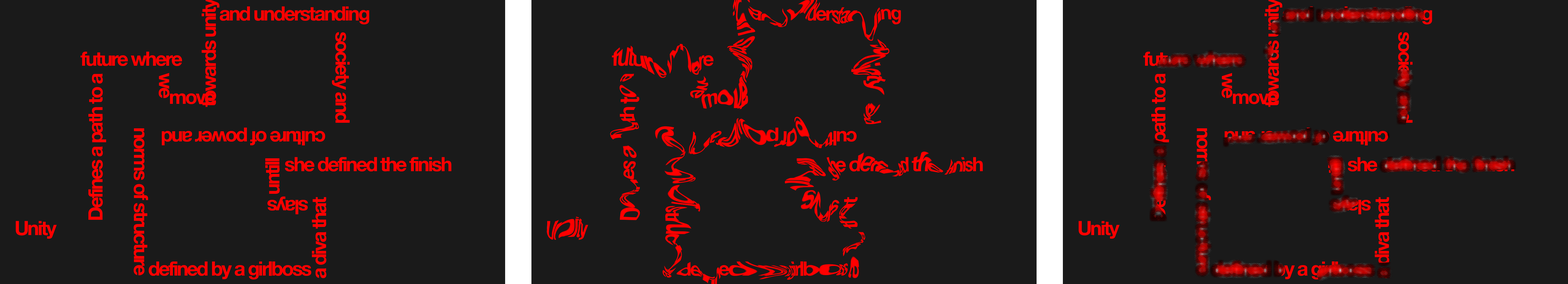
<style>
.page{position:relative;width:1568px;height:284px;background:#1a1a1a}
.page>*{position:absolute;margin:0}
.t1{font:19.7px "HelveticaNeueBold";letter-spacing:-0.08em;color:#ff0000}
</style>
<div class="page">
<p class="t1" style="left:220px;top:6px;width:149px;height:18px">and understanding</p>
<p class="t1" style="left:332px;top:32px;width:18px;height:91px;rotate:90deg">society and</p>
<p class="t1" style="left:81px;top:52px;width:101px;height:14px">future where</p>
<p class="t1" style="left:88px;top:74px;width:18px;height:146px;rotate:-90deg">Defines a path to a</p>
<p class="t1" style="left:159px;top:73px;width:10px;height:25px;rotate:90deg">we</p>
<p class="t1" style="left:170px;top:93px;width:45px;height:11px">move</p>
<p class="t1" style="left:134px;top:128px;width:14px;height:147px;rotate:90deg">norms of structure</p>
<p class="t1" style="left:162px;top:128px;width:163px;height:17px;rotate:180deg">culture of power and</p>
<p class="t1" style="left:265px;top:158px;width:15px;height:36px;rotate:-90deg">untill</p>
<p class="t1" style="left:285px;top:157px;width:166px;height:15px">she defined the finish</p>
<p class="t1" style="left:267px;top:197px;width:41px;height:17px;rotate:180deg">slays</p>
<p class="t1" style="left:312px;top:197px;width:14px;height:81px;rotate:-90deg">a diva that</p>
<p class="t1" style="left:16px;top:221px;width:41px;height:18px">Unity</p>
<p class="t1" style="left:149px;top:262px;width:162px;height:18px">defined by a girlboss</p>
</div>
